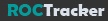
<style>
.page{position:relative;width:108px;height:21px;background:#333333}
.page>*{position:absolute;margin:0}
.t1{font:18px "BerlinSansFBDemi-Bold";color:#059b9a}
.t2{font:18px "BerlinSansFBDemi-Bold";color:#dce2ec}
</style>
<div class="page">
<p class="t1" style="left:7px;top:4px;width:36px;height:12px">ROC</p>
<p class="t2" style="left:43px;top:4px;width:62px;height:12px">Tracker</p>
</div>
